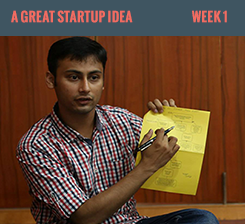
<style>
.page{position:relative;width:245px;height:224px}
.page>*{position:absolute;margin:0}
.t1{font:12.9px "OswaldStencil-Bold";letter-spacing:0.025em;color:#f36c61;font-weight:bold}
</style>
<div class="page">
<p class="t1" style="left:11px;top:10px;width:122px;height:13px">A Great Startup IDea</p>
<p class="t1" style="left:192px;top:10px;width:35px;height:13px">Week 1</p>
</div>
